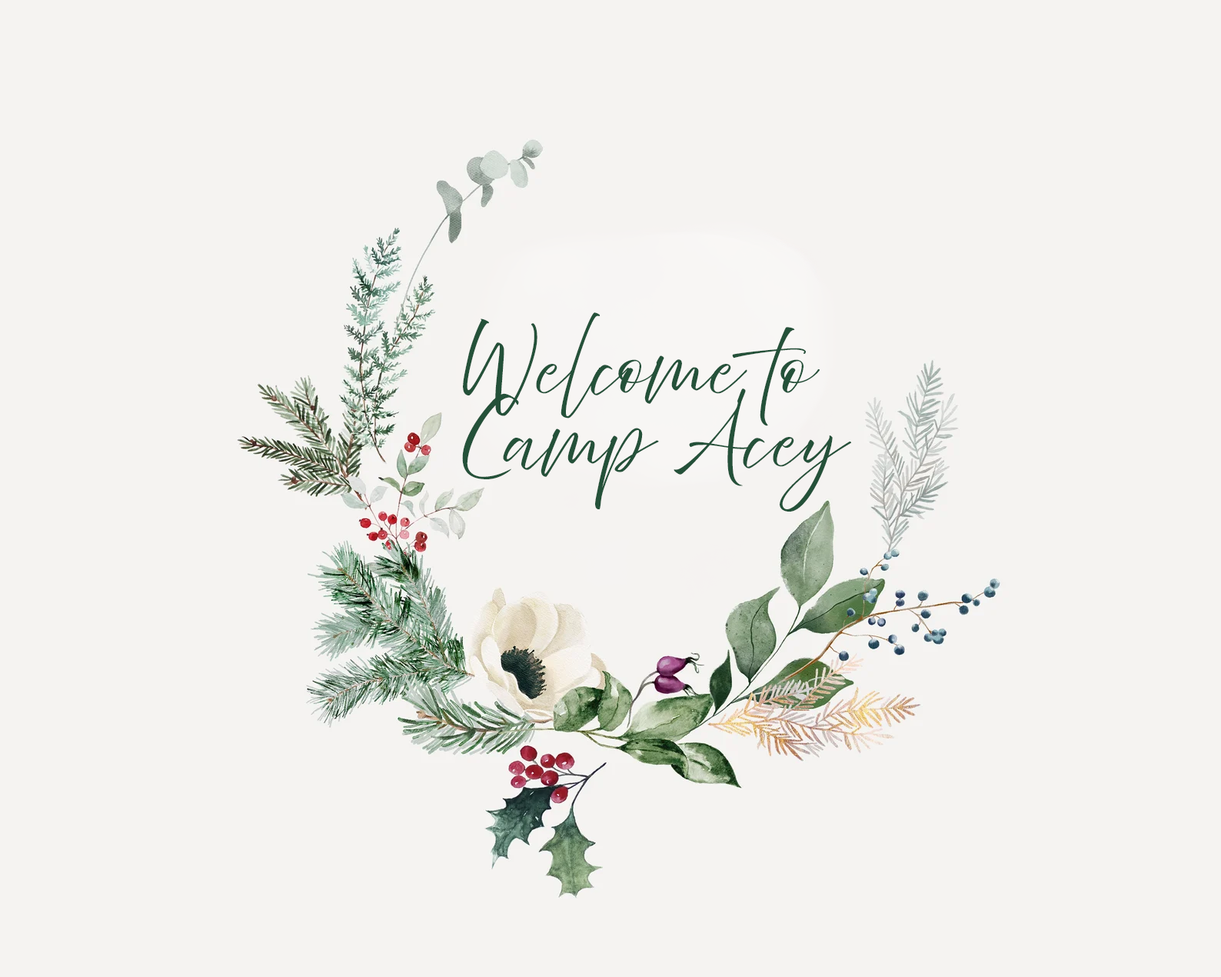
<style>
.page{position:relative;width:1221px;height:977px;background:#f5f3f1}
.page>*{position:absolute;margin:0}
.t1{font:61px "AbovetheBeyondScript-Regular";color:#245139;scale:1.07 1}
</style>
<div class="page">
<p class="t1" style="left:462px;top:312px;width:389px;height:199px">Welcome to <br>Camp Acey</p>
</div>
